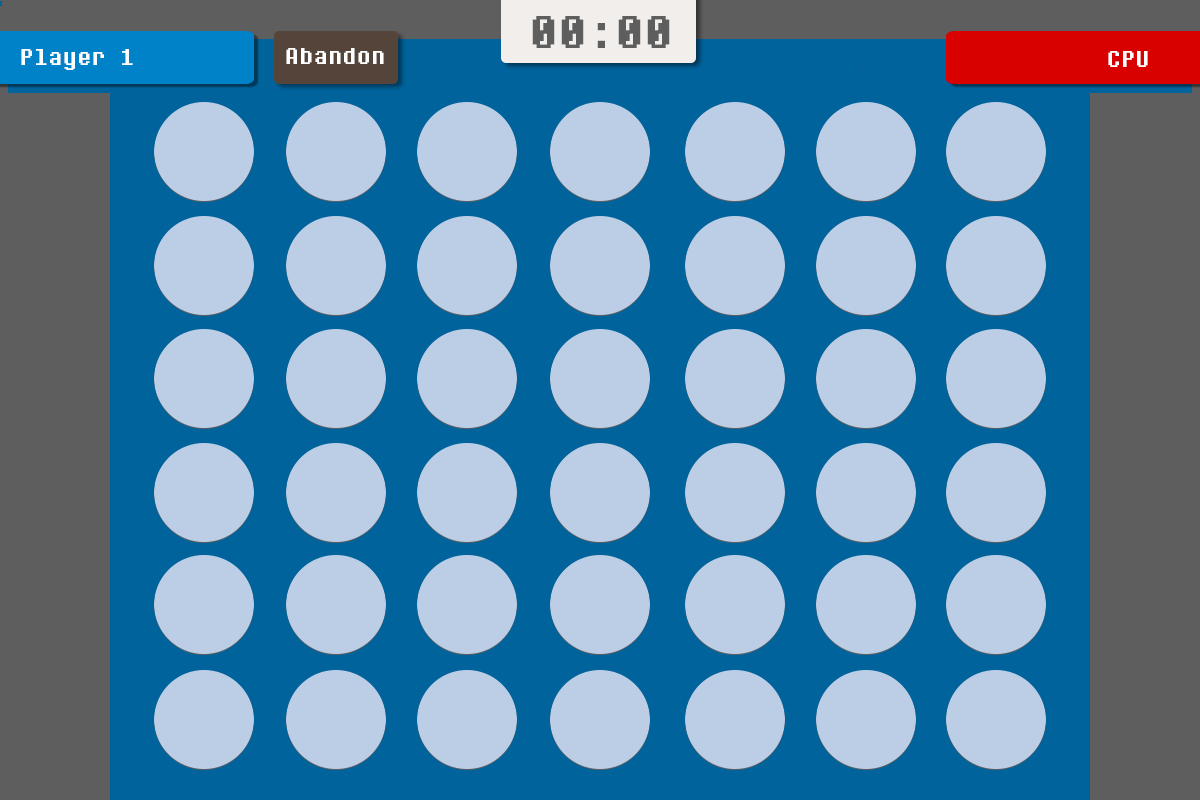
<style>
.page{position:relative;width:1200px;height:800px;background:#00639c}
.page>*{position:absolute;margin:0}
.t1{font:48px "DeterminationMono";color:#5e5e5f}
.t2{font:24px "DeterminationMono";color:#ffffff}
</style>
<div class="page">
<p class="t1" style="left:532px;top:16px;width:138px;height:32px">00:00</p>
<p class="t2" style="left:21px;top:49px;width:112px;height:21px">Player 1</p>
<p class="t2" style="left:286px;top:48px;width:98px;height:16px">Abandon</p>
<p class="t2" style="left:1108px;top:51px;width:40px;height:16px">CPU</p>
</div>
